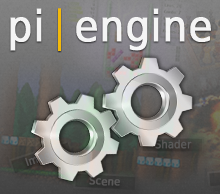
<style>
.page{position:relative;width:220px;height:194px}
.page>*{position:absolute;margin:0}
.t1{font:42.7px "DejaVuSansCondensed";color:#fefefe;font-weight:bold}
.t2{font:42.7px "DejaVuSansCondensed";letter-spacing:0.2em;color:#fefefe;font-weight:bold}
.t3{font:42.7px "DejaVuSansCondensed";letter-spacing:0.2em;color:#fdbe00}
.t4{font:10.9px "DejaVuSansCondensed";color:#5a5959;font-weight:bold}
</style>
<div class="page">
<p class="t1" style="left:10px;top:8px;width:201px;height:43px;opacity:0.92">p<span class="t2">i</span><span class="t3">|</span>engine</p>
<p class="t4" style="left:155px;top:139px;width:37px;height:10px">Shader</p>
<p class="t4" style="left:89px;top:176px;width:31px;height:10px;rotate:3deg">Scene</p>
</div>
